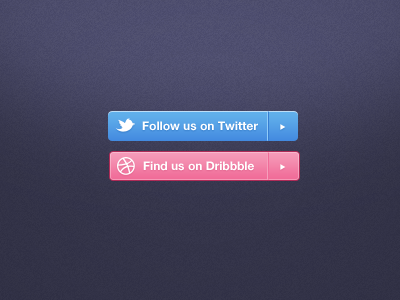
<style>
.page{position:relative;width:400px;height:300px}
.page>*{position:absolute;margin:0}
.t1{font:12px "HelveticaNeue-Bold";color:#ffffff}
</style>
<div class="page">
<p class="t1" style="left:142px;top:121px;width:116px;height:10px">Follow us on Twitter</p>
<p class="t1" style="left:143px;top:161px;width:111px;height:10px">Find us on Dribbble</p>
</div>
